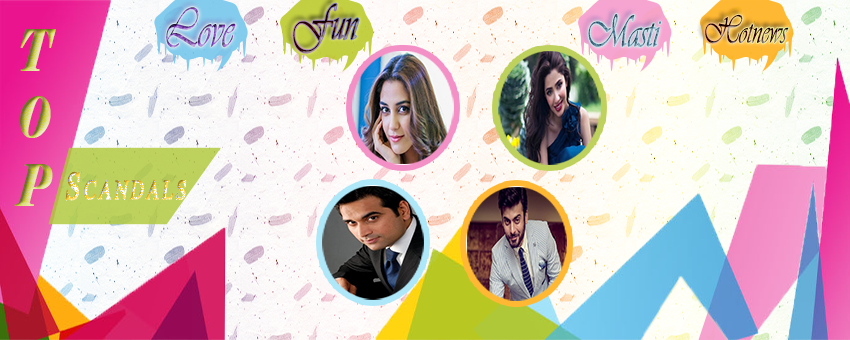
<style>
.page{position:relative;width:850px;height:340px}
.page>*{position:absolute;margin:0}
.t1{font:51.4px "Vivaldii";scale:0.67 1}
.t2{font:56px "Vivaldii";scale:0.67 1}
.t3{font:46.7px "Vivaldii";scale:0.67 1}
.t4{font:37.4px "Vivaldii";scale:0.67 1}
.t5{font:56px "Elephant-Italic";font-weight:bold;scale:0.67 1}
.t6{font:58px "Microsoft-Himalaya";letter-spacing:0.075em;font-variant:small-caps;font-weight:bold;font-style:italic;scale:0.67 1}
</style>
<div class="page">
<p class="t1" style="left:293px;top:3px;width:66px;height:50px">Fun</p>
<p class="t2" style="left:166px;top:7px;width:70px;height:41px">Love</p>
<p class="t3" style="left:588px;top:14px;width:73px;height:33px">Masti</p>
<p class="t4" style="left:705px;top:14px;width:84px;height:30px">Hotnews</p>
<p class="t5" style="left:14px;top:29px;width:42px;height:177px;text-align:center">T<br>O<br>P</p>
<p class="t6" style="left:65px;top:171px;width:122px;height:30px">Scandals</p>
</div>
